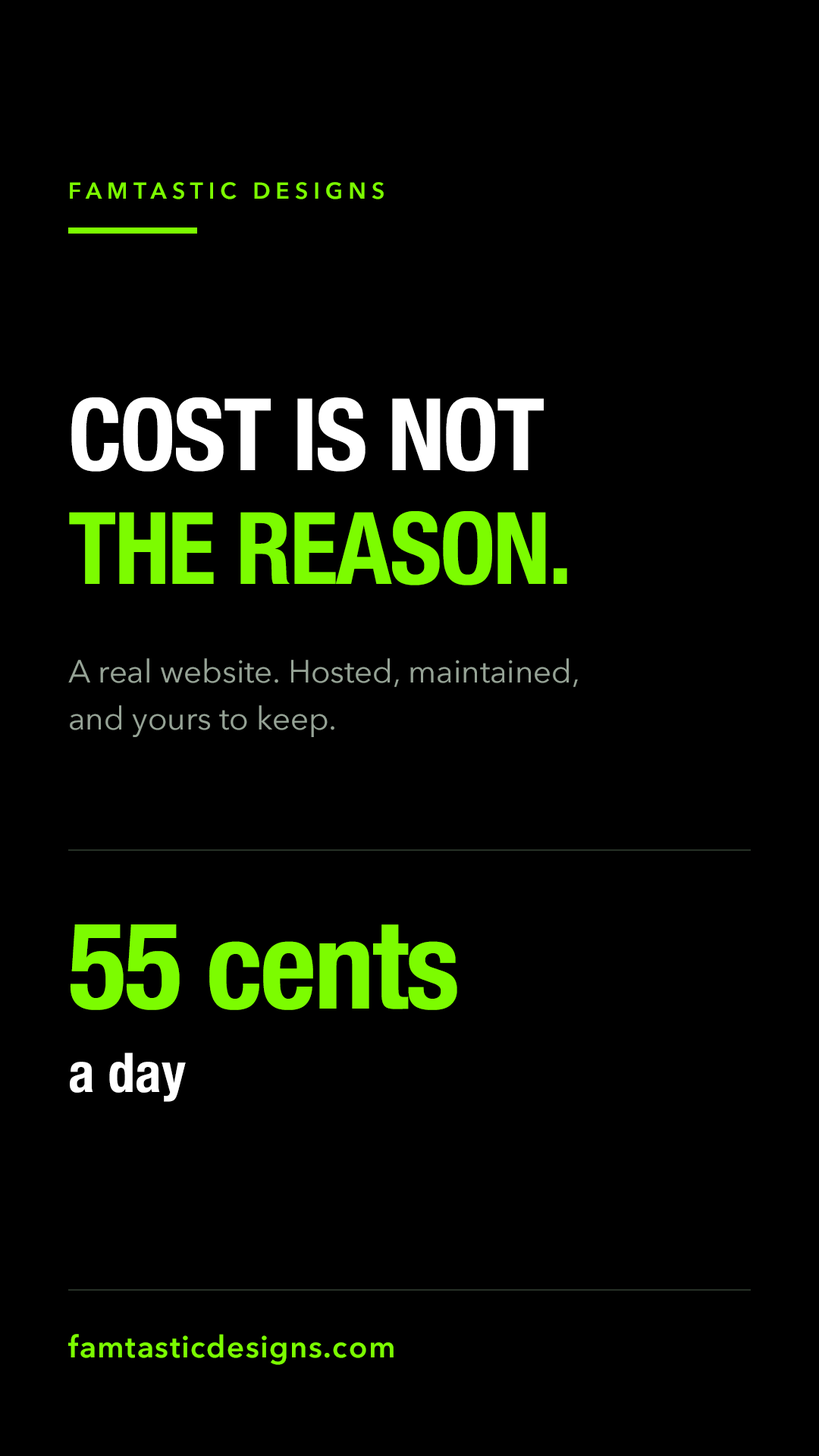
<style>
.page{position:relative;width:819px;height:1456px;background:#000000}
.page>*{position:absolute;margin:0}
.t1{font:22.7px "AvenirNext-DemiBold";letter-spacing:0.24em;color:#7cfc00}
.t2{font:100.1px "HelveticaNeue-CondensedBold";letter-spacing:-0.02em;color:#ffffff}
.t3{font:100.1px "HelveticaNeue-CondensedBold";letter-spacing:-0.02em;color:#7cfc00}
.t4{font:31.8px "AvenirNext-Regular";color:#96a396}
.t5{font:121.3px "HelveticaNeue-CondensedBold";letter-spacing:-0.02em;color:#7cfc00}
.t6{font:54.6px "HelveticaNeue-CondensedBold";color:#ffffff}
.t7{font:30.3px "AvenirNext-DemiBold";letter-spacing:0.04em;color:#7cfc00}
</style>
<div class="page">
<p class="t1" style="left:70px;top:182px;width:314px;height:17px">FAMTASTIC DESIGNS</p>
<p class="t2" style="left:71px;top:397px;width:473px;height:75px">COST IS NOT</p>
<p class="t3" style="left:69px;top:511px;width:498px;height:74px">THE REASON.</p>
<p class="t4" style="left:68px;top:658px;width:510px;height:29px">A real website. Hosted, maintained,</p>
<p class="t4" style="left:70px;top:705px;width:264px;height:32px">and yours to keep.</p>
<p class="t5" style="left:70px;top:924px;width:387px;height:86px">55 cents</p>
<p class="t6" style="left:70px;top:1053px;width:116px;height:49px">a day</p>
<p class="t7" style="left:68px;top:1334px;width:326px;height:31px">famtasticdesigns.com</p>
</div>
